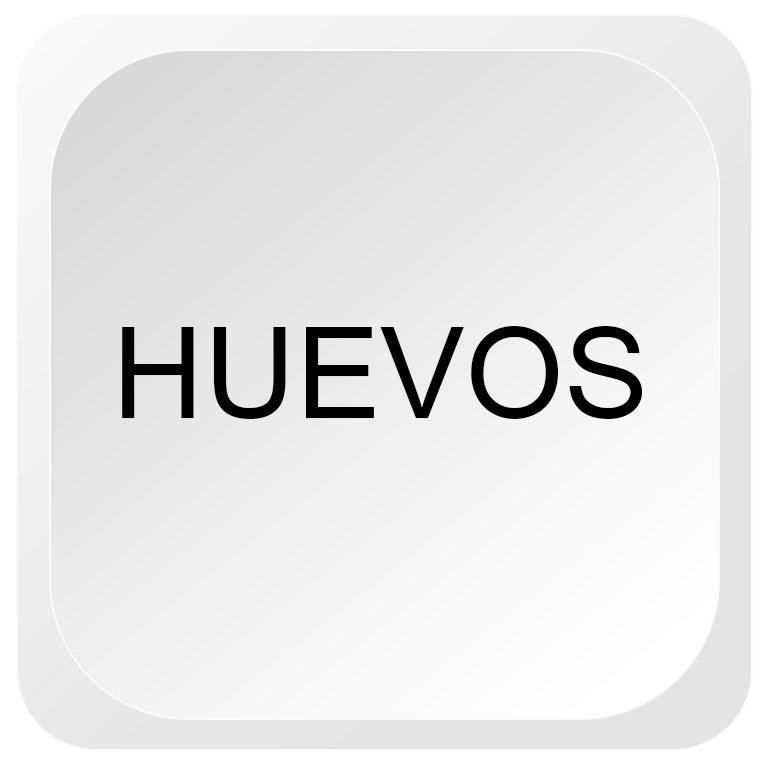
<style>
.page{position:relative;width:768px;height:768px}
.page>*{position:absolute;margin:0}
.t1{font:127px "ArialMT";color:#000000}
</style>
<div class="page">
<p class="t1" style="left:122px;top:326px;width:521px;height:93px">HUEVOS</p>
</div>
